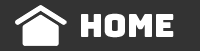
<style>
.page{position:relative;width:200px;height:51px;background:#333333}
.page>*{position:absolute;margin:0}
.t1{font:32px "Bungee-Regular";color:#ffffff}
</style>
<div class="page">
<p class="t1" style="left:81px;top:13px;width:93px;height:25px">HOME</p>
</div>
